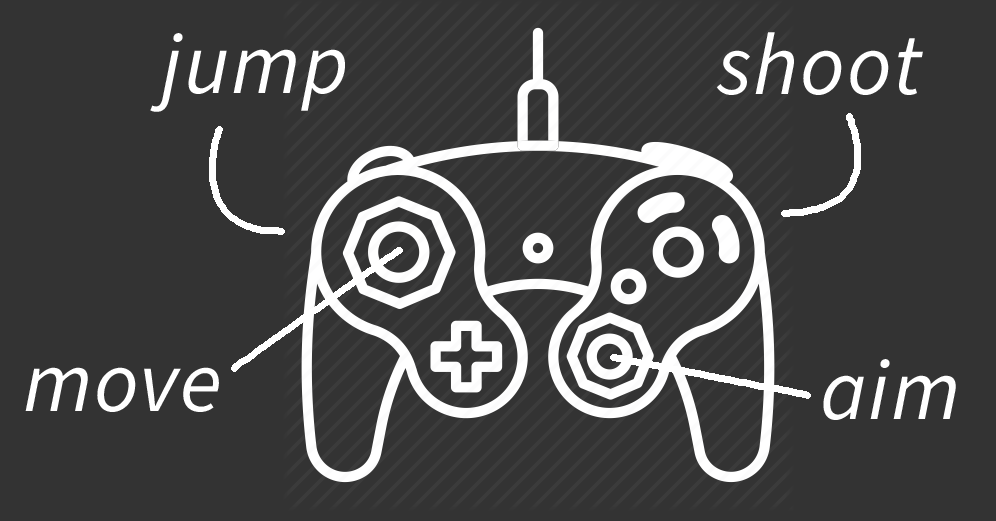
<style>
.page{position:relative;width:996px;height:521px;background:#333333}
.page>*{position:absolute;margin:0}
.t1{font:86.8px "SourceSansItalic-Italic";letter-spacing:0.02em;color:#ffffff}
</style>
<div class="page">
<p class="t1" style="left:150px;top:33px;width:195px;height:79px">jump</p>
<p class="t1" style="left:716px;top:32px;width:207px;height:63px">shoot</p>
<p class="t1" style="left:823px;top:359px;width:133px;height:61px">aim</p>
<p class="t1" style="left:25px;top:367px;width:194px;height:45px">move</p>
</div>
